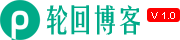
<style>
.page{position:relative;width:180px;height:40px;background:#ffffff}
.page>*{position:absolute;margin:0}
.t1{font:30px "FZYTK--GBK1-0";letter-spacing:-0.2em;color:#00aa88}
</style>
<div class="page">
<p class="t1" style="left:46px;top:5px;width:94px;height:30px">轮回博客</p>
</div>
